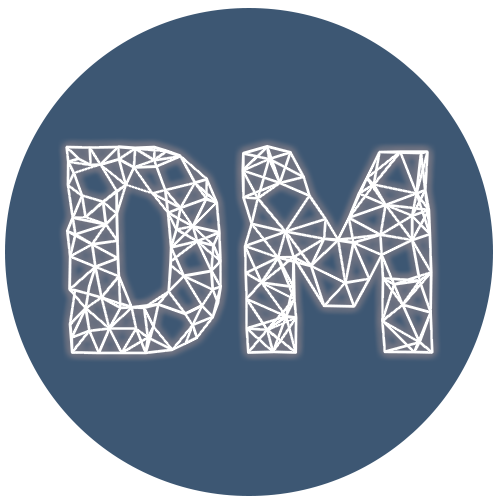
<style>
.page{position:relative;width:500px;height:500px;background:#3d5773}
.page>*{position:absolute;margin:0}
.t1{font:206.6px "Adamas-Regular";color:#ffffff}
</style>
<div class="page">
<p class="t1" style="left:66px;top:145px;width:367px;height:209px">DM</p>
</div>
